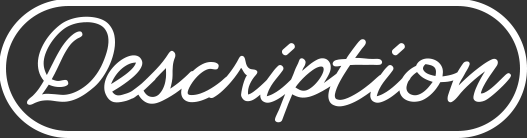
<style>
.page{position:relative;width:527px;height:138px;background:#333333}
.page>*{position:absolute;margin:0}
.t1{font:104.7px "d_CCMatineeIdol";color:#ffffff}
</style>
<div class="page">
<p class="t1" style="left:27px;top:16px;width:484px;height:107px">Description</p>
</div>
